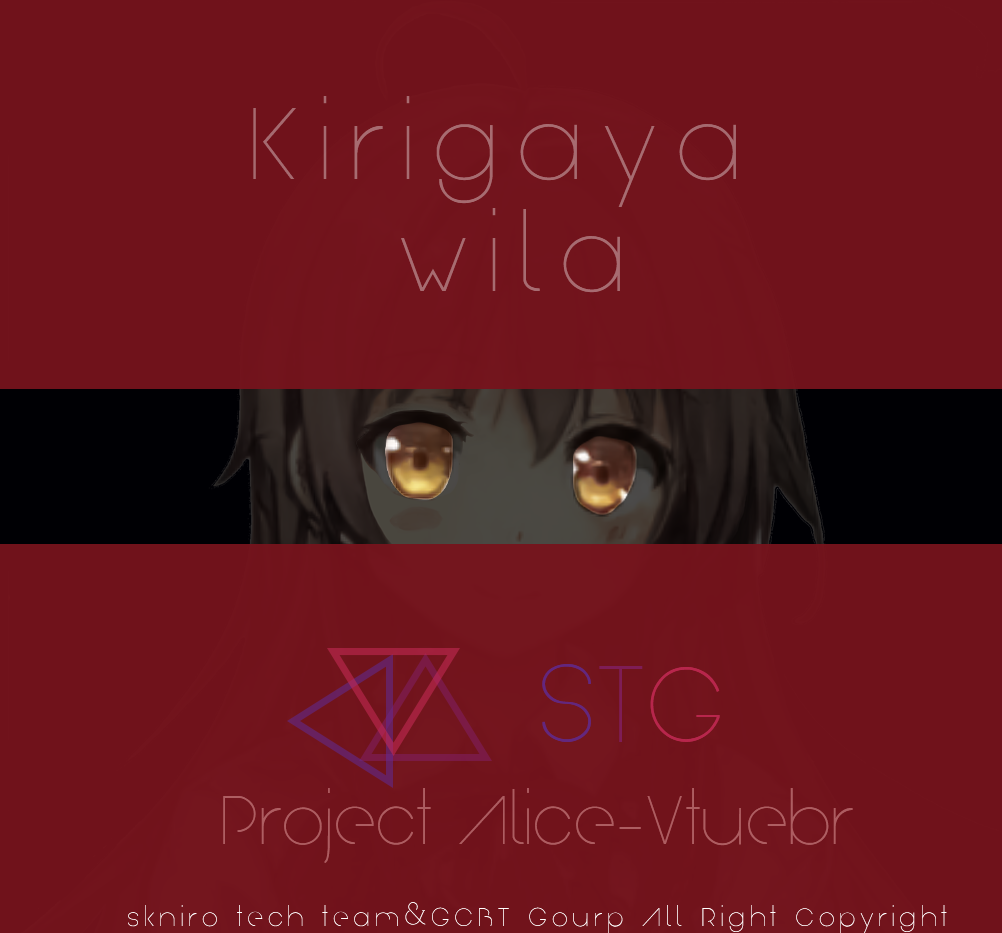
<style>
.page{position:relative;width:1002px;height:933px;background:#70121b}
.page>*{position:absolute;margin:0}
.t1{font:100px "Arual";letter-spacing:0.18em;color:#a76c71}
.t2{font:106px "Arual";color:#5f2b96}
.t3{font:106px "Arual";color:#811f65}
.t4{font:106px "Arual";color:#c92b58}
.t5{font:66.7px "Arual";color:#ad5d61}
.t6{font:25px "Arual";letter-spacing:0.18em;color:#ffffff}
</style>
<div class="page">
<p class="t1" style="left:253px;top:96px;width:483px;height:111px">Kirigaya</p>
<p class="t1" style="left:401px;top:208px;width:219px;height:85px">wila</p>
<p class="t2" style="left:542px;top:664px;width:178px;height:78px">S<span class="t3">T</span><span class="t4">G</span></p>
<p class="t5" style="left:223px;top:788px;width:630px;height:75px">Project Alice-Vtuebr</p>
<p class="t6" style="left:128px;top:902px;width:819px;height:31px">skniro tech team&amp;GCBT Gourp All Right Copyright</p>
</div>
